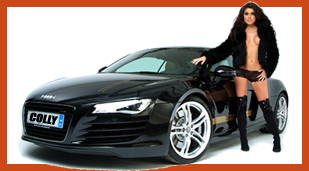
<style>
.page{position:relative;width:309px;height:171px;background:#ffffff}
.page>*{position:absolute;margin:0}
.t1{font:10.8px "Impact";color:#000000;scale:1.13 1}
</style>
<div class="page">
<p class="t1" style="left:29px;top:112px;width:30px;height:13px;rotate:9deg">COLLY</p>
</div>
